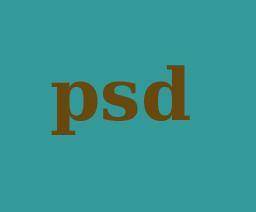
<style>
.page{position:relative;width:256px;height:212px;background:#339999}
.page>*{position:absolute;margin:0}
.t1{font:72px "BitstreamVeraSerif-Bold";color:#69480d}
</style>
<div class="page">
<p class="t1" style="left:51px;top:65px;width:139px;height:70px">psd</p>
</div>
